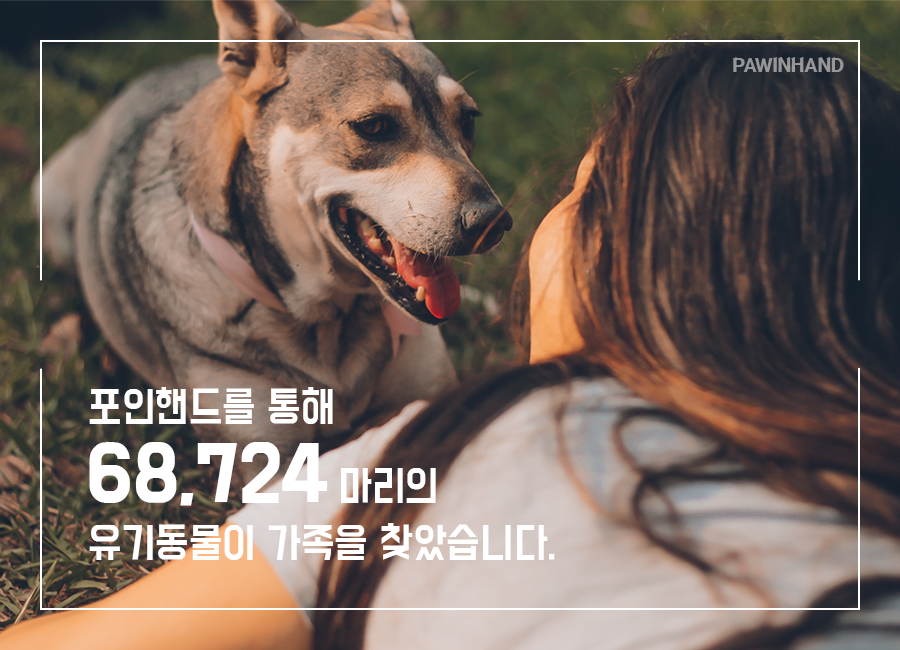
<style>
.page{position:relative;width:900px;height:650px}
.page>*{position:absolute;margin:0}
.t1{font:21.2px "KOTRA-LEAP";color:#959799;scale:0.94 1}
.t2{font:37.1px "BMDoHyeon";color:#ffffff;scale:0.94 1}
.t3{font:68.9px "BMDoHyeon";color:#ffffff;font-weight:bold;scale:0.94 1}
</style>
<div class="page">
<p class="t1" style="left:732px;top:57px;width:112px;height:15px">PAWINHAND</p>
<p class="t2" style="left:89px;top:387px;width:244px;height:37px">포인핸드를 통해</p>
<p class="t3" style="left:89px;top:442px;width:238px;height:64px">68,724</p>
<p class="t2" style="left:341px;top:468px;width:95px;height:35px">마리의</p>
<p class="t2" style="left:89px;top:523px;width:466px;height:37px">유기동물이 가족을 찾았습니다.</p>
</div>
